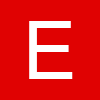
<style>
.page{position:relative;width:100px;height:100px;background:#e00202}
.page>*{position:absolute;margin:0}
.t1{font:80px "ArialMT";letter-spacing:0.1em;color:#ffffff}
</style>
<div class="page">
<p class="t1" style="left:29px;top:21px;width:44px;height:58px">E</p>
</div>
